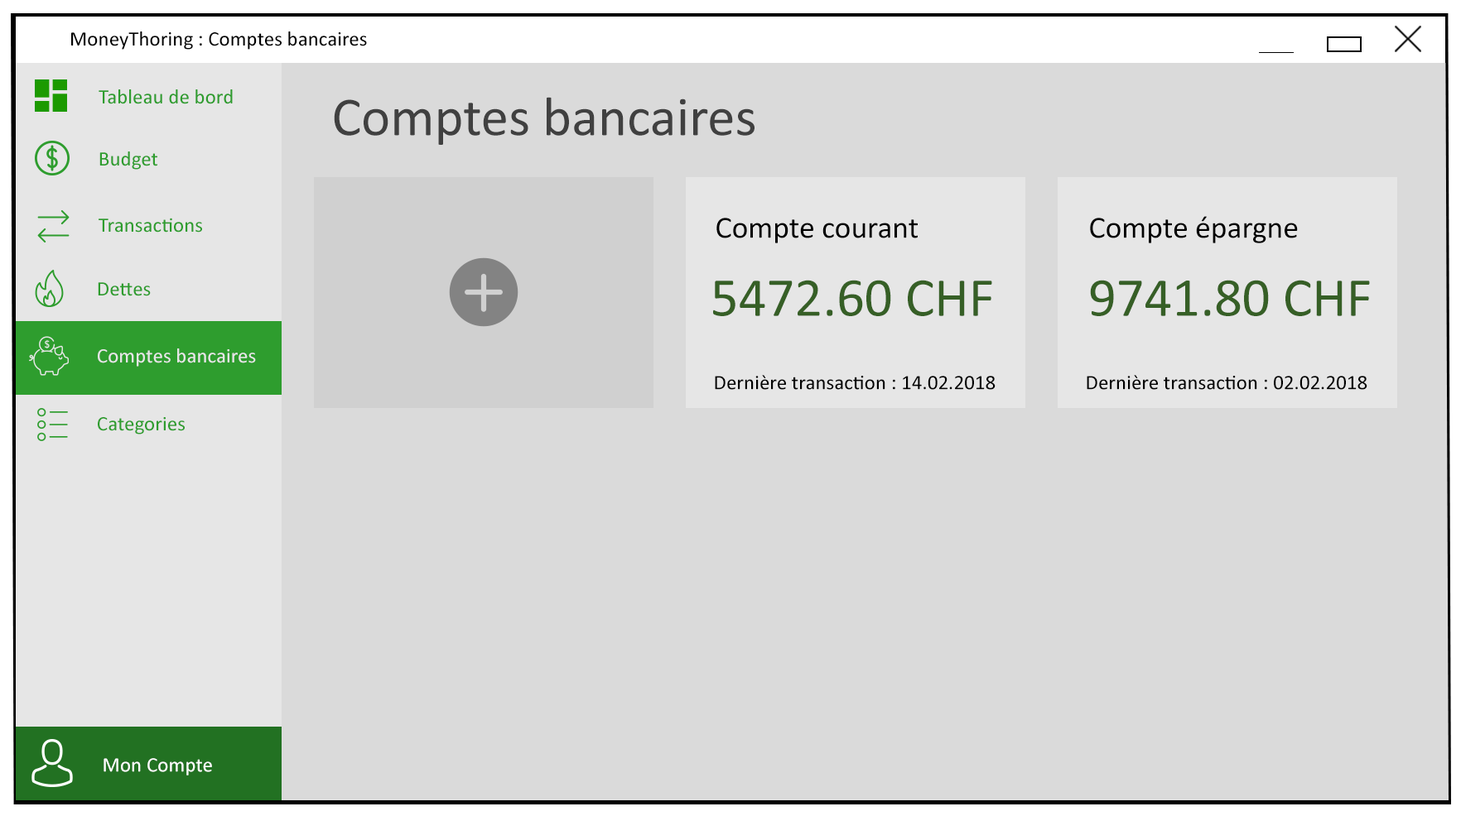
<style>
.page{position:relative;width:1461px;height:816px;background:#dadada}
.page>*{position:absolute;margin:0}
.t1{font:20.7px "Calibri";color:#010101}
.t2{font:20.7px "Calibri";color:#2e9d2e}
.t3{font:55.2px "Calibri";color:#404040}
.t4{font:31px "Calibri";color:#000000}
.t5{font:55.2px "Calibri";color:#365f26}
.t6{font:20.7px "Calibri";color:#e6e6e6}
.t7{font:20.7px "Calibri";color:#000000}
.t8{font:20.7px "Calibri";color:#ffffff}
</style>
<div class="page">
<p class="t1" style="left:71px;top:31px;width:296px;height:19px">MoneyThoring : Comptes bancaires</p>
<p class="t2" style="left:99px;top:89px;width:134px;height:15px">Tableau de bord</p>
<p class="t3" style="left:334px;top:97px;width:420px;height:48px">Comptes bancaires</p>
<p class="t2" style="left:99px;top:152px;width:58px;height:18px">Budget</p>
<p class="t2" style="left:99px;top:218px;width:103px;height:15px">Transactions</p>
<p class="t4" style="left:716px;top:218px;width:201px;height:25px">Compte courant</p>
<p class="t4" style="left:1090px;top:216px;width:207px;height:27px">Compte épargne</p>
<p class="t5" style="left:713px;top:280px;width:279px;height:36px">5472.60 CHF</p>
<p class="t5" style="left:1090px;top:280px;width:280px;height:36px">9741.80 CHF</p>
<p class="t2" style="left:98px;top:282px;width:53px;height:14px">Dettes</p>
<p class="t6" style="left:98px;top:349px;width:158px;height:18px">Comptes bancaires</p>
<p class="t7" style="left:715px;top:375px;width:280px;height:15px">Dernière transaction : 14.02.2018</p>
<p class="t7" style="left:1086px;top:375px;width:281px;height:15px">Dernière transaction : 02.02.2018</p>
<p class="t2" style="left:98px;top:417px;width:87px;height:18px">Categories</p>
<p class="t8" style="left:103px;top:758px;width:109px;height:18px">Mon Compte</p>
</div>
